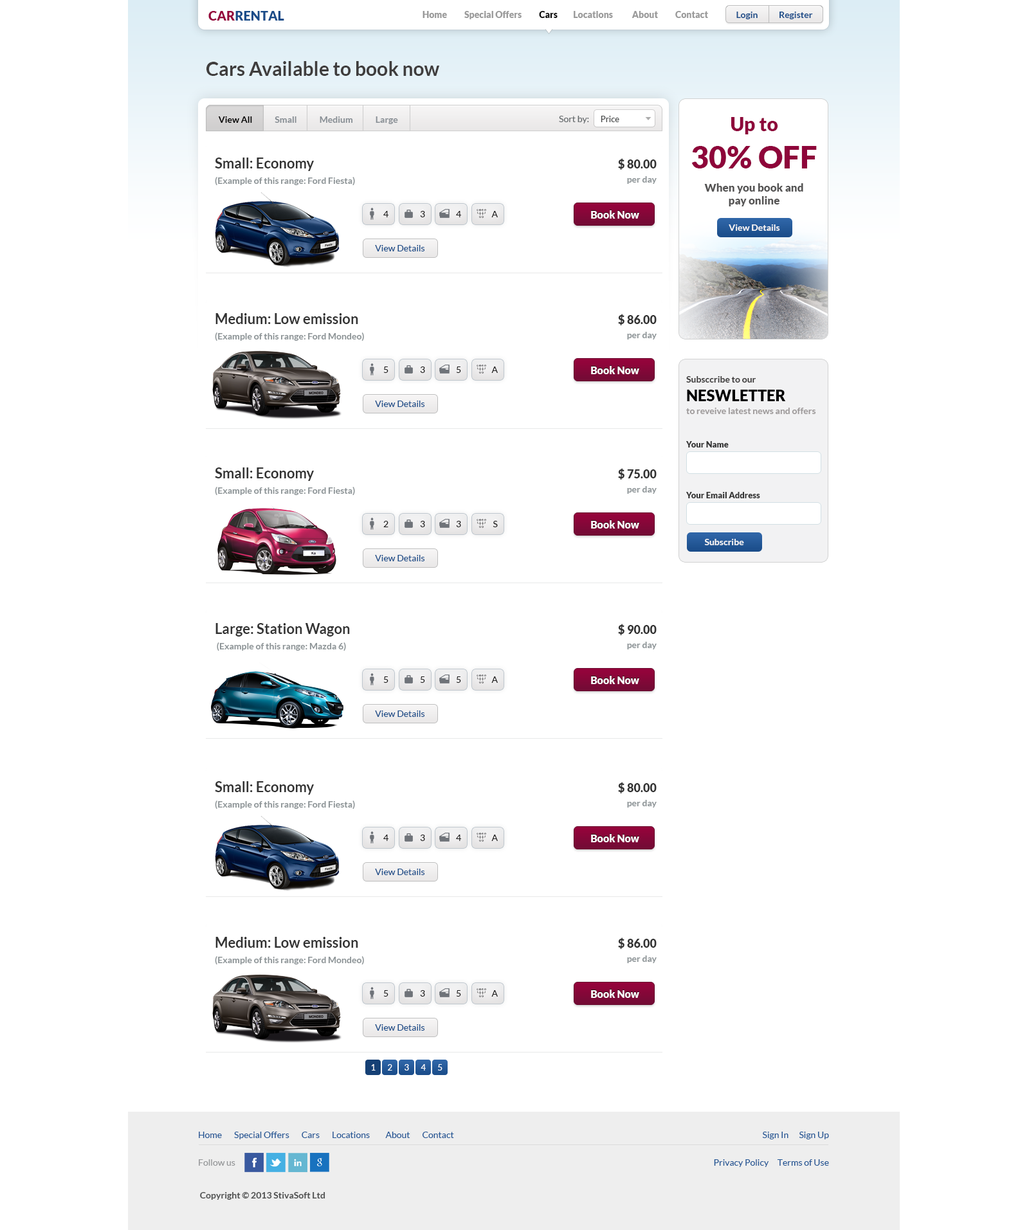
<style>
.page{position:relative;width:1029px;height:1230px;background:#ffffff}
.page>*{position:absolute;margin:0}
.t1{font:12.9px "Lato-Black";color:#1a4c89;text-transform:uppercase}
.t2{font:12.9px "Lato-Black";color:#95033b;text-transform:uppercase}
.t3{font:9px "Lato-Black";color:#9a9a9a}
.t4{font:9px "Lato-Black";color:#0a0a0a}
.t5{font:9.1px "Lato-Bold";color:#1a4c89}
.t6{font:19.3px "Lato-Bold";color:#3f3d3d}
.t7{font:9px "Lato-Bold";color:#878e94}
.t8{font:9px "Lato-Bold";color:#000000}
.t9{font:9px "Lato-Regular";color:#64696c}
.t10{font:8.4px "Lato-Regular";color:#434546}
.t11{font:10.9px/11.6px "Lato-Black";color:#555454}
.t12{font:19.3px "Lato-Black";color:#8e053a}
.t13{font:30.9px "Lato-Black";color:#8e053a;text-transform:uppercase}
.t14{font:10.9px "Lato-Black";color:#555454}
.t15{font:9px/15.4px "Lato-Bold";color:#8c9396}
.t16{font:14.1px "Lato-Bold";color:#333333}
.t17{font:9px/14.1px "Lato-Bold";color:#8c9396}
.t18{font:11.6px "Lato-Black";color:#333333}
.t19{font:11.6px/14.1px "Lato-Black";color:#333333}
.t20{font:9px "Lato-Regular";color:#1d1c1c}
.t21{font:10.3px "Lato-Black";color:#ffffff}
.t22{font:9px "Lato-Bold";color:#f7f6f6}
.t23{font:9px "Lato-Regular";color:#1a4c89}
.t24{font:14.1px/15.4px "Lato-Bold";color:#333333}
.t25{font:9px/12.9px "Lato-Bold";color:#9c9898}
.t26{font:9px "Lato-Bold";color:#393737}
.t27{font:15.4px "Lato-Black";color:#000000;text-transform:uppercase}
.t28{font:8.4px "Lato-Black";color:#333333}
.t29{font:8.4px "Lato-Regular";color:#ffffff}
.t30{font:9px "Lato-Regular";color:#225695}
.t31{font:9px "Lato-Regular";color:#949698}
.t32{font:9px "Lato-Bold";color:#4f5050}
</style>
<div class="page">
<p class="t1" style="left:208px;top:11px;width:76px;height:10px"><span class="t2">car</span>rental</p>
<p class="t3" style="left:422px;top:11px;width:286px;height:8px">Home          Special Offers       <span class="t4">   Cars  </span>       Locations           About          Contact</p>
<p class="t5" style="left:736px;top:12px;width:77px;height:7px">Login            Register</p>
<p class="t6" style="left:206px;top:61px;width:233px;height:15px">Cars Available to book now</p>
<p class="t7" style="left:218px;top:116px;width:180px;height:8px"><span class="t8"> View All     </span>        Small             Medium             Large</p>
<p class="t9" style="left:559px;top:116px;width:30px;height:7px">Sort by:</p>
<p class="t10" style="left:600px;top:116px;width:19px;height:6px">Price</p>
<p class="t11" style="left:691px;top:117px;width:125px;height:89px;text-align:center"><span class="t12">Up to <br></span><span class="t13">30% off<br><br></span>When you book and <br><span class="t14">pay online</span></p>
<p class="t15" style="left:215px;top:158px;width:140px;height:28px"><span class="t16">Small: Economy <br></span>(Example of this range: Ford Fiesta)</p>
<p class="t17" style="left:618px;top:158px;width:38px;height:26px;text-align:right"><span class="t18">$ 80.0</span><span class="t19">0<br></span>per day</p>
<p class="t20" style="left:383px;top:211px;width:5px;height:6px">4</p>
<p class="t20" style="left:420px;top:211px;width:5px;height:6px">3</p>
<p class="t20" style="left:456px;top:211px;width:5px;height:6px">4</p>
<p class="t20" style="left:491px;top:211px;width:7px;height:6px">A</p>
<p class="t21" style="left:591px;top:210px;width:48px;height:9px">Book Now</p>
<p class="t22" style="left:728px;top:224px;width:52px;height:7px">View Details</p>
<p class="t23" style="left:375px;top:245px;width:50px;height:6px">View Details</p>
<p class="t15" style="left:215px;top:313px;width:149px;height:28px"><span class="t24">Medium: Low emission <br></span>(Example of this range: Ford Mondeo)</p>
<p class="t17" style="left:618px;top:314px;width:38px;height:25px;text-align:right"><span class="t18">$ 86.0</span><span class="t19">0<br></span>per day</p>
<p class="t21" style="left:591px;top:366px;width:48px;height:8px">Book Now</p>
<p class="t20" style="left:383px;top:366px;width:5px;height:7px">5</p>
<p class="t20" style="left:420px;top:366px;width:5px;height:7px">3</p>
<p class="t20" style="left:456px;top:366px;width:5px;height:7px">5</p>
<p class="t20" style="left:491px;top:366px;width:7px;height:7px">A</p>
<p class="t25" style="left:686px;top:376px;width:130px;height:38px"><span class="t26">Subsccribe to our <br></span><span class="t27">neswletter<br></span>to reveive latest news and offers</p>
<p class="t23" style="left:375px;top:401px;width:50px;height:6px">View Details</p>
<p class="t28" style="left:686px;top:441px;width:42px;height:6px">Your Name</p>
<p class="t15" style="left:215px;top:467px;width:140px;height:29px"><span class="t16">Small: Economy <br></span>(Example of this range: Ford Fiesta)</p>
<p class="t17" style="left:618px;top:468px;width:38px;height:26px;text-align:right"><span class="t18">$ 75.0</span><span class="t19">0<br></span>per day</p>
<p class="t28" style="left:686px;top:492px;width:74px;height:6px">Your Email Address</p>
<p class="t20" style="left:383px;top:521px;width:5px;height:6px">2</p>
<p class="t20" style="left:420px;top:521px;width:5px;height:6px">3</p>
<p class="t20" style="left:456px;top:521px;width:5px;height:6px">3</p>
<p class="t20" style="left:492px;top:521px;width:6px;height:6px">S</p>
<p class="t21" style="left:591px;top:520px;width:48px;height:8px">Book Now</p>
<p class="t22" style="left:704px;top:539px;width:40px;height:6px">Subscribe</p>
<p class="t23" style="left:375px;top:555px;width:50px;height:6px">View Details</p>
<p class="t15" style="left:215px;top:623px;width:135px;height:28px"><span class="t24">Large: Station Wagon<br></span> (Example of this range: Mazda 6)</p>
<p class="t17" style="left:618px;top:624px;width:38px;height:25px;text-align:right"><span class="t18">$ 90.0</span><span class="t19">0<br></span>per day</p>
<p class="t20" style="left:383px;top:676px;width:5px;height:7px">5</p>
<p class="t20" style="left:420px;top:676px;width:5px;height:7px">5</p>
<p class="t20" style="left:456px;top:676px;width:5px;height:7px">5</p>
<p class="t20" style="left:491px;top:676px;width:7px;height:7px">A</p>
<p class="t21" style="left:591px;top:676px;width:48px;height:8px">Book Now</p>
<p class="t23" style="left:375px;top:710px;width:50px;height:7px">View Details</p>
<p class="t15" style="left:215px;top:781px;width:140px;height:28px"><span class="t16">Small: Economy <br></span>(Example of this range: Ford Fiesta)</p>
<p class="t17" style="left:618px;top:782px;width:38px;height:25px;text-align:right"><span class="t18">$ 80.0</span><span class="t19">0<br></span>per day</p>
<p class="t21" style="left:591px;top:834px;width:48px;height:8px">Book Now</p>
<p class="t20" style="left:383px;top:834px;width:5px;height:7px">4</p>
<p class="t20" style="left:420px;top:834px;width:5px;height:7px">3</p>
<p class="t20" style="left:456px;top:834px;width:5px;height:7px">4</p>
<p class="t20" style="left:491px;top:834px;width:7px;height:7px">A</p>
<p class="t23" style="left:375px;top:869px;width:50px;height:6px">View Details</p>
<p class="t15" style="left:215px;top:937px;width:149px;height:28px"><span class="t24">Medium: Low emission <br></span>(Example of this range: Ford Mondeo)</p>
<p class="t17" style="left:618px;top:937px;width:38px;height:26px;text-align:right"><span class="t18">$ 86.0</span><span class="t19">0<br></span>per day</p>
<p class="t21" style="left:591px;top:989px;width:48px;height:9px">Book Now</p>
<p class="t20" style="left:383px;top:990px;width:5px;height:6px">5</p>
<p class="t20" style="left:420px;top:990px;width:5px;height:6px">3</p>
<p class="t20" style="left:456px;top:990px;width:5px;height:6px">5</p>
<p class="t20" style="left:491px;top:990px;width:7px;height:6px">A</p>
<p class="t23" style="left:375px;top:1024px;width:50px;height:6px">View Details</p>
<p class="t29" style="left:371px;top:1064px;width:4px;height:6px">1</p>
<p class="t29" style="left:388px;top:1064px;width:4px;height:6px">2</p>
<p class="t29" style="left:404px;top:1064px;width:5px;height:6px">3</p>
<p class="t29" style="left:420px;top:1064px;width:6px;height:6px">4</p>
<p class="t29" style="left:438px;top:1064px;width:4px;height:6px">5</p>
<p class="t30" style="left:199px;top:1131px;width:255px;height:8px">Home       Special Offers       Cars       Locations         About       Contact</p>
<p class="t30" style="left:762px;top:1131px;width:67px;height:8px">Sign In      Sign Up</p>
<p class="t31" style="left:199px;top:1159px;width:36px;height:7px">Follow us</p>
<p class="t30" style="left:714px;top:1159px;width:115px;height:8px">Privacy Policy     Terms of Use</p>
<p class="t32" style="left:200px;top:1192px;width:125px;height:8px">Copyright © 2013 StivaSoft Ltd</p>
</div>
